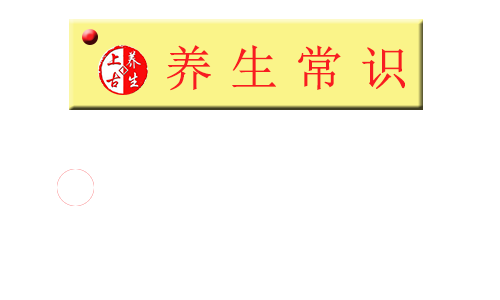
<style>
.page{position:relative;width:500px;height:300px;background:#ffffff}
.page>*{position:absolute;margin:0}
.t1{font:48px "SimSun";letter-spacing:-0.1em;color:#f81c21;font-weight:bold}
</style>
<div class="page">
<p class="t1" style="left:167px;top:45px;width:238px;height:46px">养 生 常 识</p>
</div>
